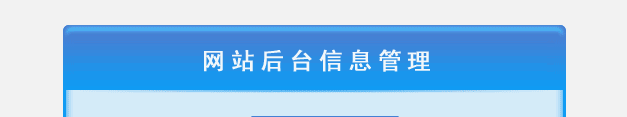
<style>
.page{position:relative;width:627px;height:117px;background:#f2f2f2}
.page>*{position:absolute;margin:0}
.t1{font:24px "SimHei";letter-spacing:0.2em;color:#f2f7fa;font-weight:bold}
</style>
<div class="page">
<p class="t1" style="left:204px;top:49px;width:226px;height:23px">网站后台信息管理</p>
</div>
